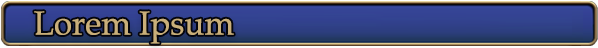
<style>
.page{position:relative;width:598px;height:48px}
.page>*{position:absolute;margin:0}
.t1{font:33.3px "BookAntiqua";color:#c9af7a}
</style>
<div class="page">
<p class="t1" style="left:34px;top:11px;width:200px;height:33px">Lorem Ipsum</p>
</div>
